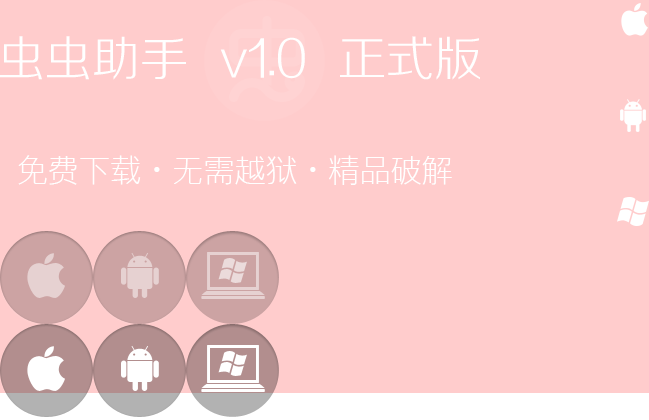
<style>
.page{position:relative;width:649px;height:420px;background:#ffcccc}
.page>*{position:absolute;margin:0}
.t1{font:48px "FZZXHJW--GB1-0";color:#ffffff}
.t2{font:31.2px "Tensentype-JiaLiXianHeiJ";color:#ffffff}
</style>
<div class="page">
<p class="t1" style="left:0px;top:36px;width:480px;height:44px">虫虫助手  v1.0  正式版</p>
<p class="t2" style="left:18px;top:155px;width:434px;height:30px">免费下载·无需越狱·精品破解</p>
</div>
